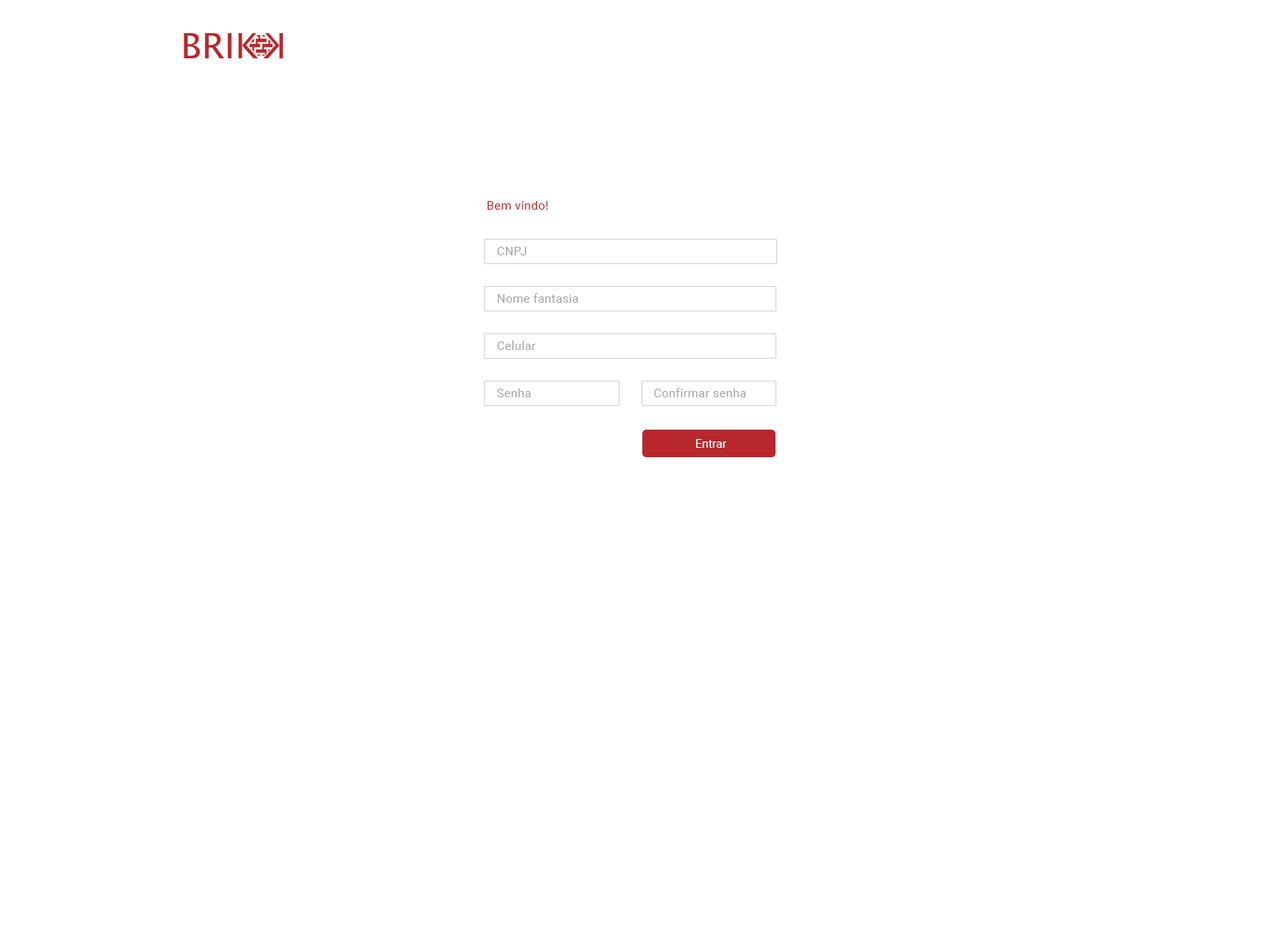
<style>
.page{position:relative;width:1261px;height:946px;background:#ffffff}
.page>*{position:absolute;margin:0}
.t1{font:11.8px "Roboto-Regular";letter-spacing:0.03em;color:#b8272c}
.t2{font:11.8px "Roboto-Regular";letter-spacing:0.03em;color:#a4a4a4}
.t3{font:11.8px "Roboto-Regular";color:#ffffff}
</style>
<div class="page">
<p class="t1" style="left:487px;top:201px;width:61px;height:9px">Bem vindo!</p>
<p class="t2" style="left:497px;top:247px;width:29px;height:8px">CNPJ</p>
<p class="t2" style="left:497px;top:293px;width:81px;height:10px">Nome fantasia</p>
<p class="t2" style="left:497px;top:340px;width:39px;height:10px">Celular</p>
<p class="t2" style="left:497px;top:389px;width:34px;height:8px">Senha</p>
<p class="t2" style="left:654px;top:388px;width:92px;height:9px">Confirmar senha</p>
<p class="t3" style="left:696px;top:439px;width:31px;height:9px">Entrar</p>
</div>
